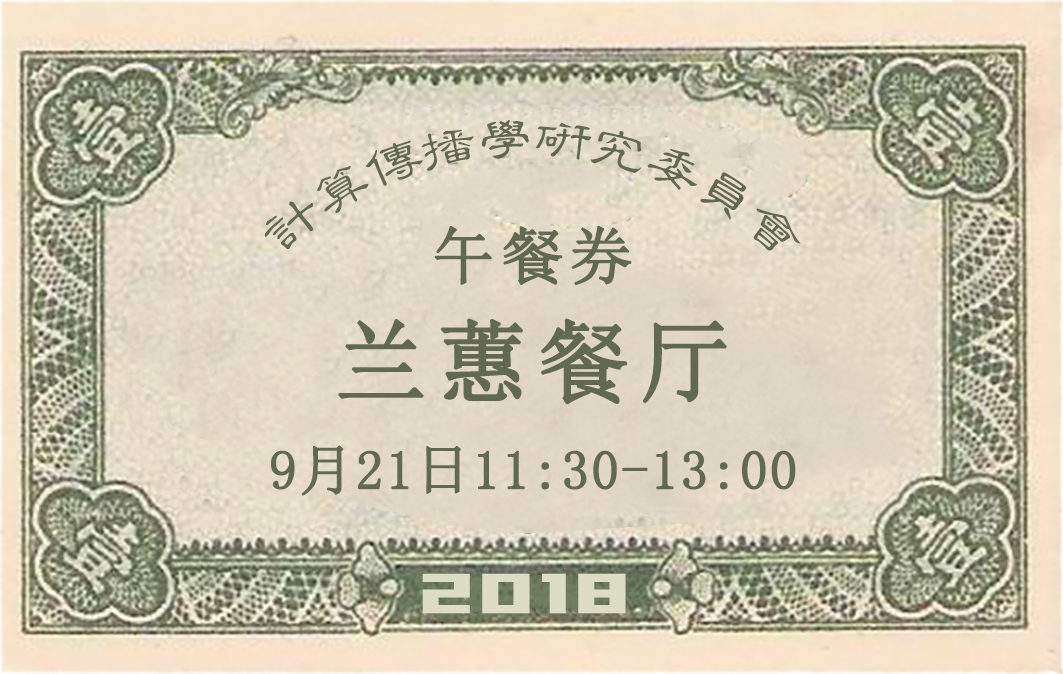
<style>
.page{position:relative;width:1063px;height:674px}
.page>*{position:absolute;margin:0}
.t1{font:49.5px "CTLiShuSF";letter-spacing:-0.02em;color:#69755f}
.t2{font:62.5px "SimSun";letter-spacing:0.08em;color:#616952;font-weight:bold}
.t3{font:91.4px "SimSun";letter-spacing:0.08em;color:#616952;font-weight:bold}
.t4{font:54.4px "SimSun";letter-spacing:0.02em;color:#616952;font-weight:bold}
.t5{font:62.5px "04b09";letter-spacing:0.08em;color:#dddcc5}
</style>
<div class="page">
<p class="t1" style="left:264px;top:120px;width:537px;height:131px;rotate:1deg">计算传播学研究委员会</p>
<p class="t2" style="left:434px;top:225px;width:198px;height:61px">午餐券</p>
<p class="t3" style="left:338px;top:318px;width:389px;height:87px">兰蕙餐厅</p>
<p class="t4" style="left:271px;top:445px;width:525px;height:51px">9月21日11:30-13:00</p>
<p class="t5" style="left:422px;top:573px;width:204px;height:41px">2018</p>
</div>
